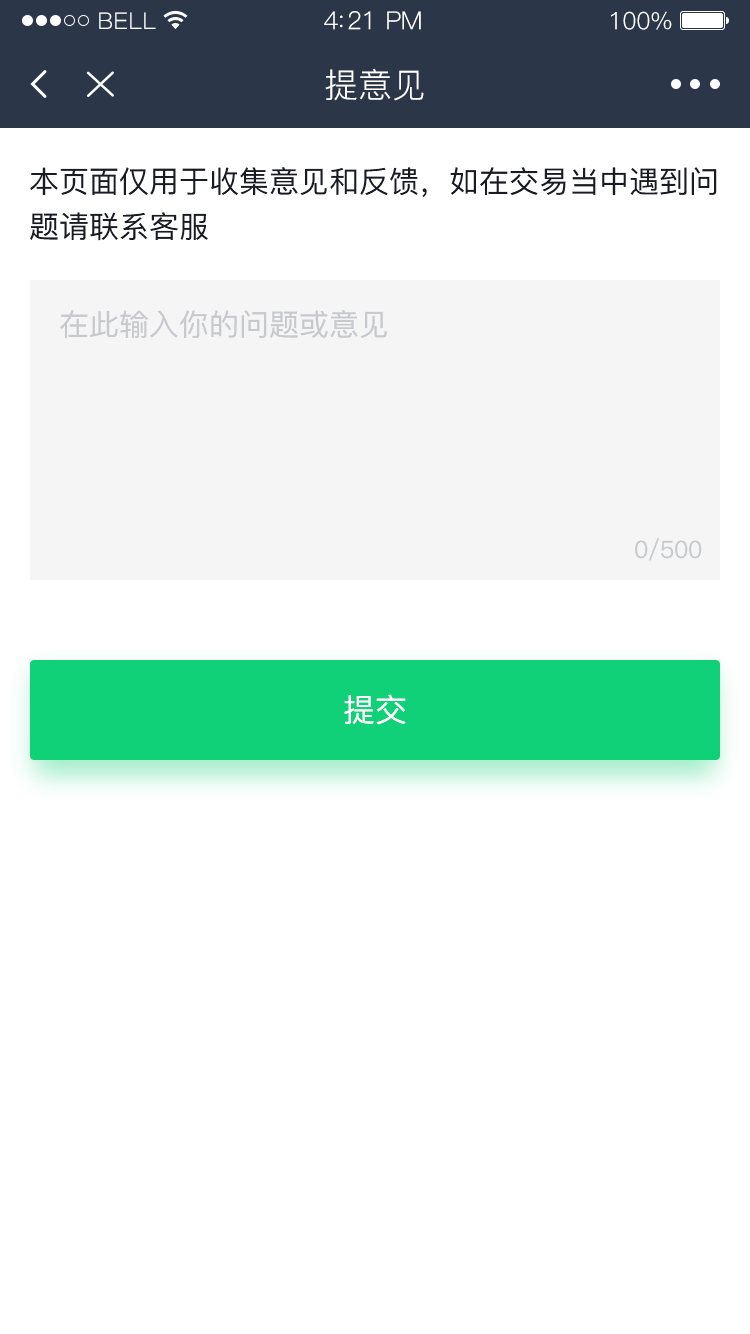
<style>
.page{position:relative;width:750px;height:1334px;background:#ffffff}
.page>*{position:absolute;margin:0}
.t1{font:23px "PingFang-SC-Regular";letter-spacing:0.02em;color:#ffffff}
.t2{font:25px "PingFang-SC-Regular";letter-spacing:-0.02em;color:#ffffff}
.t3{font:24px "PingFang-SC-Regular";letter-spacing:-0.02em;color:#ffffff}
.t4{font:34px "PingFang-SC-Regular";color:#ffffff}
.t5{font:30px/45px "PingFang-SC-Medium";color:#181b23}
.t6{font:30px "PingFang-SC-Medium";color:#c7c9cd}
.t7{font:24px "PingFang-SC-Medium";color:#c7c9cd}
.t8{font:32px "PingFang-SC-Medium";color:#ffffff}
</style>
<div class="page">
<p class="t1" style="left:99px;top:12px;width:57px;height:17px">BELL</p>
<p class="t2" style="left:324px;top:11px;width:97px;height:19px">4:21 PM</p>
<p class="t3" style="left:611px;top:11px;width:61px;height:19px">100%</p>
<p class="t4" style="left:325px;top:68px;width:99px;height:33px">提意见</p>
<p class="t5" style="left:30px;top:167px;width:687px;height:74px">本页面仅用于收集意见和反馈，如在交易当中遇到问<br>题请联系客服</p>
<p class="t6" style="left:60px;top:310px;width:327px;height:28px">在此输入你的问题或意见</p>
<p class="t7" style="left:635px;top:538px;width:67px;height:23px">0/500</p>
<p class="t8" style="left:344px;top:694px;width:62px;height:31px">提交</p>
</div>
